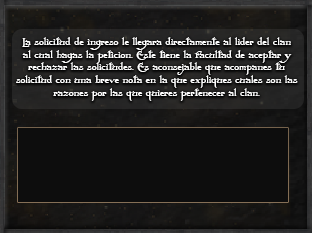
<style>
.page{position:relative;width:312px;height:233px;background:#0d0d0d}
.page>*{position:absolute;margin:0}
.t1{font:10.2px/12.7px "Folkard";color:#ffffff}
</style>
<div class="page">
<p class="t1" style="left:16px;top:37px;width:282px;height:64px;text-align:center">La solicitud de ingreso le llegara directamente al lider del clan<br>al cual hagas la peticion. Este tiene la facultad de aceptar y<br>rechazar las solicitudes. Es aconsejable que acompanes tu<br>solicitud con una breve nota en la que expliques cuales son las<br>razones por las que quieres pertenecer al clan.</p>
</div>
